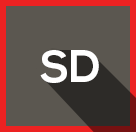
<style>
.page{position:relative;width:136px;height:132px;background:#5b5750}
.page>*{position:absolute;margin:0}
.t1{font:44.4px "NexaBold";color:#ffffff}
</style>
<div class="page">
<p class="t1" style="left:40px;top:50px;width:59px;height:33px">SD</p>
</div>
